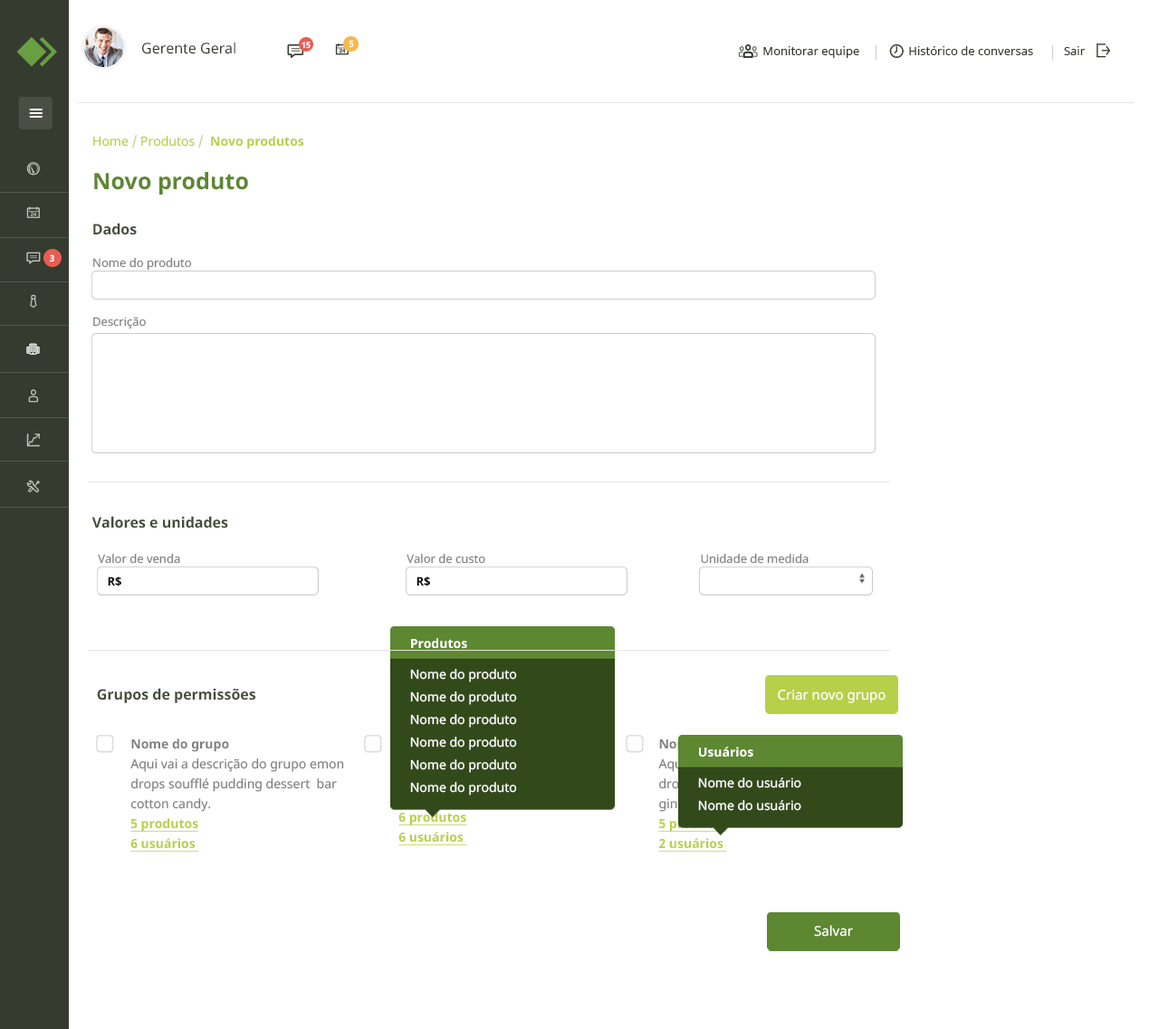
<style>
.page{position:relative;width:1159px;height:1029px;background:#ffffff}
.page>*{position:absolute;margin:0}
.t1{font:14.5px "NotoSans";color:#353b2f}
.t2{font:8.1px "NotoSans-Bold";color:#ffffff}
.t3{font:9.1px "NotoSans-Bold";color:#ffffff}
.t4{font:11.8px "NotoSans";color:#353b2f}
.t5{font:12.7px "NotoSans-Bold";color:#b8cf49}
.t6{font:12.7px "NotoSans";color:#b8cf49}
.t7{font:12.7px "NotoSans";color:#c7cfa1}
.t8{font:22.6px "NotoSans-Bold";color:#5d8730}
.t9{font:14.5px "NotoSans-Bold";color:#424d38}
.t10{font:9px "NotoSans-Bold";color:#ffffff}
.t11{font:11.8px/58.8px "NotoSans";color:#808080}
.t12{font:11.8px/27.1px "NotoSans";color:#808080}
.t13{font:11.8px/22.6px "NotoSans-Bold";color:#000000}
.t14{font:11.8px "NotoSans";color:#808080}
.t15{font:12.7px/22.6px "NotoSans";color:#ffffff}
.t16{font:12.7px "NotoSans-Bold";color:#ffffff}
.t17{font:12.7px "NotoSans";color:#ffffff}
.t18{font:13.6px "NotoSans";color:#ffffff}
.t19{font:12.7px/19.9px "NotoSans";color:#808080}
.t20{font:12.7px/36.2px "NotoSans-Bold";color:#808080}
.t21{font:12.7px/19.9px "NotoSans-Bold";color:#b8cf49;text-decoration:underline}
</style>
<div class="page">
<p class="t1" style="left:142px;top:42px;width:93px;height:12px">Gerente Geral</p>
<p class="t2" style="left:301px;top:42px;width:9px;height:7px">15</p>
<p class="t3" style="left:348px;top:40px;width:6px;height:8px">5</p>
<p class="t4" style="left:763px;top:46px;width:321px;height:12px">Monitorar equipe                Histórico de conversas          Sair</p>
<p class="t5" style="left:93px;top:135px;width:211px;height:14px"><span class="t6">Home </span><span class="t7">/</span><span class="t6"> Produtos </span><span class="t7">/  </span>Novo produtos</p>
<p class="t8" style="left:94px;top:172px;width:154px;height:23px">Novo produto</p>
<p class="t9" style="left:93px;top:223px;width:44px;height:12px">Dados</p>
<p class="t10" style="left:50px;top:254px;width:4px;height:9px">3</p>
<p class="t11" style="left:93px;top:257px;width:99px;height:72px">Nome do produto<br>Descrição</p>
<p class="t9" style="left:91px;top:516px;width:137px;height:13px">Valores e unidades</p>
<p class="t12" style="left:98px;top:553px;width:82px;height:34px">Valor de venda<br><span class="t13">   R$</span></p>
<p class="t12" style="left:406px;top:553px;width:79px;height:34px">Valor de custo<br><span class="t13">   R$</span></p>
<p class="t14" style="left:701px;top:553px;width:107px;height:11px">Unidade de medida</p>
<p class="t15" style="left:410px;top:638px;width:107px;height:158px"><span class="t16">Produtos<br></span><span class="t17"><br>Nome do produto<br></span>Nome do produto<br>Nome do produto<br>Nome do produto<br>Nome do produto<br>Nome do produto</p>
<p class="t9" style="left:97px;top:688px;width:158px;height:15px">Grupos de permissões</p>
<p class="t18" style="left:778px;top:689px;width:107px;height:14px">Criar novo grupo</p>
<p class="t19" style="left:130px;top:739px;width:214px;height:113px"><span class="t20">Nome do grupo<br></span>Aqui vai a descrição do grupo emon drops soufflé pudding dessert  bar cotton candy.<br><span class="t21">5 produtos<br>6 usuários</span></p>
<p class="t17" style="left:698px;top:747px;width:103px;height:64px"><span class="t16">Usuários<br></span><br>Nome do usuário<br><span class="t15">Nome do </span>usuário</p>
<p class="t18" style="left:814px;top:925px;width:39px;height:12px">Salvar</p>
</div>
